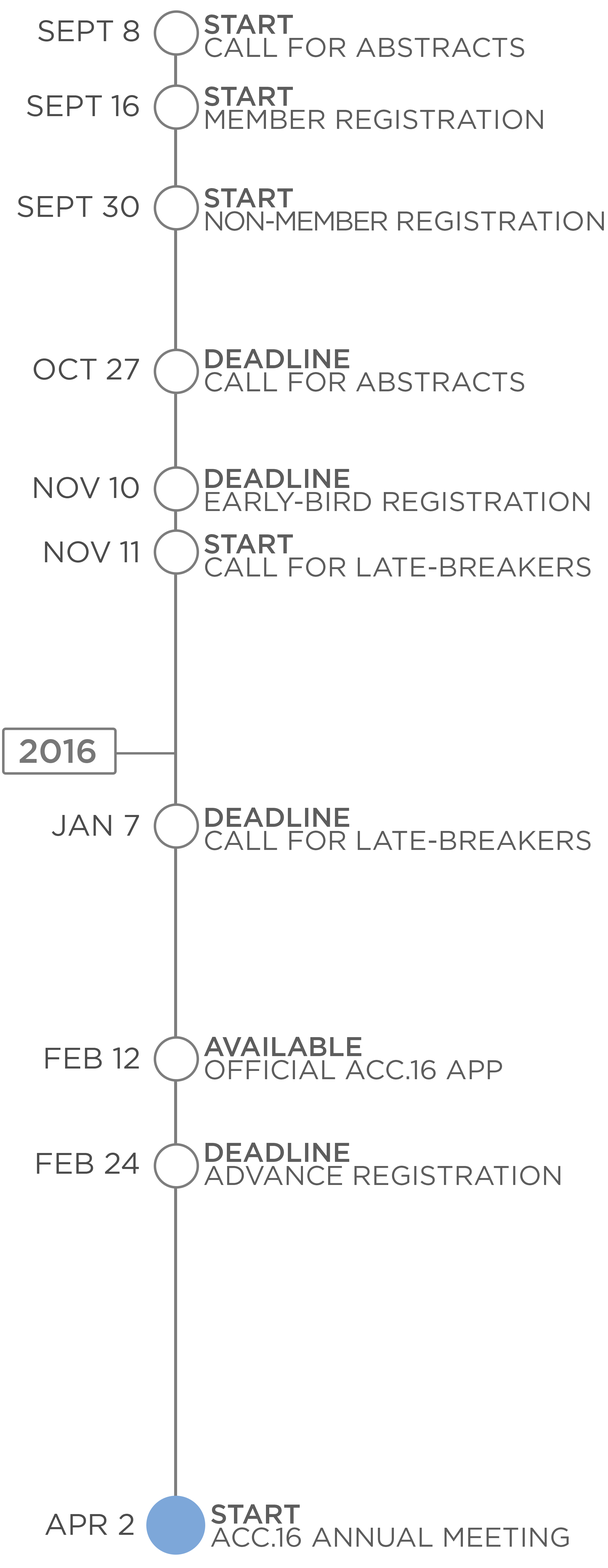
<style>
.page{position:relative;width:608px;height:1568px;background:#ffffff}
.page>*{position:absolute;margin:0}
.t1{font:27.3px/23.1px "Gotham-Book";color:#5d5d5d}
.t2{font:27.3px/23.1px "Gotham-Medium";color:#5d5d5d}
.t3{font:27.3px/23.1px "Gotham-Book";letter-spacing:-0.06em;color:#5d5d5d}
</style>
<div class="page">
<p class="t1" style="left:204px;top:15px;width:320px;height:42px"><span class="t2">START<br></span>CALL FOR ABSTRACTS</p>
<p class="t1" style="left:204px;top:87px;width:339px;height:42px"><span class="t2">START<br></span>MEMBER REGISTRATION</p>
<p class="t1" style="left:204px;top:188px;width:400px;height:43px"><span class="t2">START<br></span><span class="t3">NON-MEMBER</span> REGISTRATION</p>
<p class="t1" style="left:205px;top:349px;width:319px;height:43px"><span class="t2">DEADLINE<br></span>CALL FOR ABSTRACTS</p>
<p class="t1" style="left:206px;top:469px;width:384px;height:42px"><span class="t2">DEADLINE<br></span>EARLY-BIRD REGISTRATION</p>
<p class="t1" style="left:204px;top:534px;width:387px;height:43px"><span class="t2">START<br></span>CALL FOR LATE-BREAKERS</p>
<p class="t1" style="left:205px;top:808px;width:386px;height:42px"><span class="t2">DEADLINE<br></span>CALL FOR LATE-BREAKERS</p>
<p class="t1" style="left:204px;top:1037px;width:298px;height:42px"><span class="t2">AVAILABLE<br></span>OFFICIAL ACC.16 APP</p>
<p class="t1" style="left:204px;top:1143px;width:356px;height:42px"><span class="t2">DEADLINE<br></span>ADVANCE REGISTRATION</p>
<p class="t1" style="left:211px;top:1504px;width:358px;height:43px"><span class="t2">START<br></span>ACC.16 ANNUAL MEETING</p>
</div>
